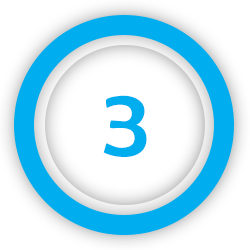
<style>
.page{position:relative;width:250px;height:250px;background:#ffffff}
.page>*{position:absolute;margin:0}
.t1{font:100px "BerlinSansFB-Reg";color:#00aeef}
</style>
<div class="page">
<p class="t1" style="left:103px;top:95px;width:44px;height:62px">3</p>
</div>
